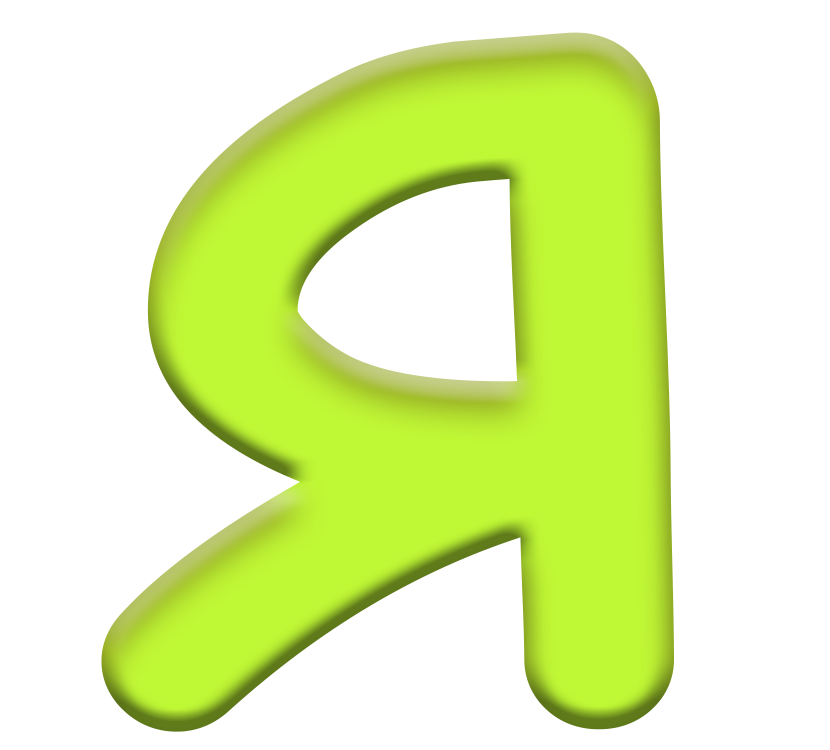
<style>
.page{position:relative;width:830px;height:750px;background:#ffffff}
.page>*{position:absolute;margin:0}
.t1{font:876.3px "ComicSansMS-Bold";color:#bff835;font-weight:bold;scale:1.04 1}
</style>
<div class="page">
<p class="t1" style="left:101px;top:32px;width:573px;height:700px">Я</p>
</div>
